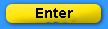
<style>
.page{position:relative;width:108px;height:29px}
.page>*{position:absolute;margin:0}
.t1{font:14px "Arial-BoldMT";color:#010407}
</style>
<div class="page">
<p class="t1" style="left:36px;top:8px;width:37px;height:10px">Enter</p>
</div>
